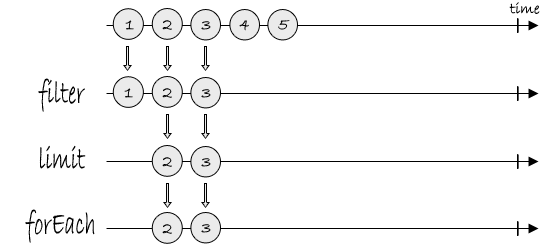
<style>
.page{position:relative;width:550px;height:250px;background:#ffffff}
.page>*{position:absolute;margin:0}
.t1{font:15.9px "BradleyHandITC";color:#000000}
.t2{font:16.7px "BradleyHandITC";color:#000000}
.t3{font:33.3px "BradleyHandITC";color:#000000;scale:0.66 1}
</style>
<div class="page">
<p class="t1" style="left:509px;top:2px;width:31px;height:12px">time</p>
<p class="t2" style="left:125px;top:20px;width:9px;height:10px">1</p>
<p class="t2" style="left:162px;top:20px;width:10px;height:10px">2</p>
<p class="t2" style="left:201px;top:21px;width:10px;height:9px">3</p>
<p class="t2" style="left:239px;top:20px;width:10px;height:11px">4</p>
<p class="t2" style="left:278px;top:20px;width:12px;height:10px">5</p>
<p class="t3" style="left:38px;top:78px;width:47px;height:34px">filter</p>
<p class="t2" style="left:124px;top:88px;width:9px;height:10px">1</p>
<p class="t2" style="left:162px;top:88px;width:10px;height:10px">2</p>
<p class="t2" style="left:201px;top:89px;width:10px;height:9px">3</p>
<p class="t3" style="left:39px;top:145px;width:47px;height:24px">limit</p>
<p class="t2" style="left:162px;top:157px;width:10px;height:10px">2</p>
<p class="t2" style="left:201px;top:158px;width:10px;height:9px">3</p>
<p class="t3" style="left:25px;top:209px;width:70px;height:34px;text-align:right">forEach<br>h</p>
<p class="t2" style="left:162px;top:224px;width:10px;height:10px">2</p>
<p class="t2" style="left:201px;top:224px;width:10px;height:9px">3</p>
</div>
